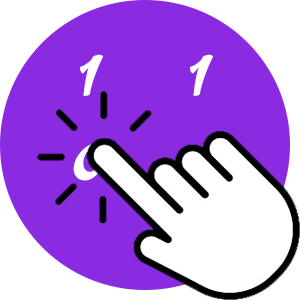
<style>
.page{position:relative;width:300px;height:300px;background:#8a2be2}
.page>*{position:absolute;margin:0}
.t1{font:72px "AromiaScript-Medium";color:#ffffff}
</style>
<div class="page">
<p class="t1" style="left:73px;top:54px;width:146px;height:128px;text-align:center">1    1<br>0    1</p>
</div>
